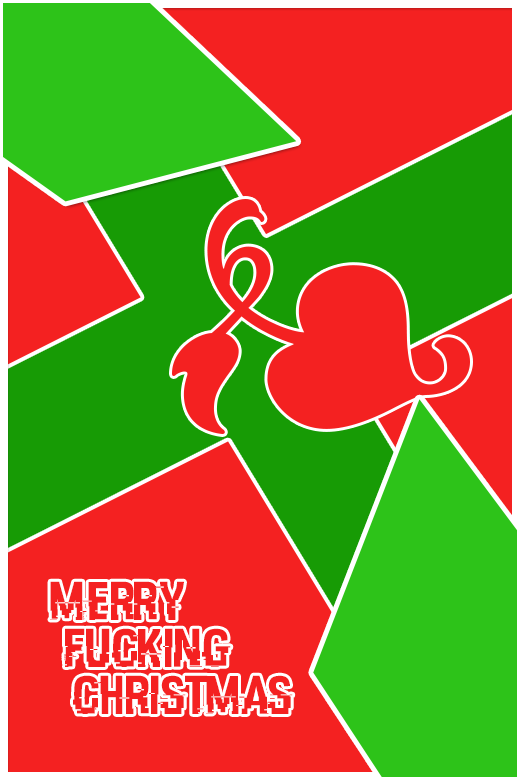
<style>
.page{position:relative;width:520px;height:780px;background:#f42121}
.page>*{position:absolute;margin:0}
.t1{font:54.7px/46.7px "HACKED";color:#f42121}
</style>
<div class="page">
<p class="t1" style="left:50px;top:581px;width:243px;height:133px;text-align:center">Merry <br> Fucking <br>  Christmas</p>
</div>
